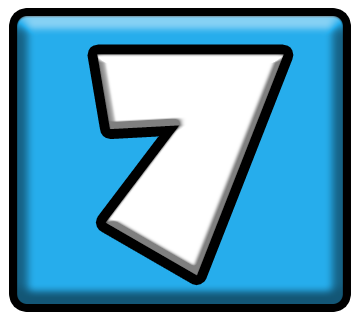
<style>
.page{position:relative;width:360px;height:320px;background:#26adec}
.page>*{position:absolute;margin:0}
.t1{font:324.4px "Funhouse";color:#ffffff;scale:0.91 1}
</style>
<div class="page">
<p class="t1" style="left:97px;top:54px;width:187px;height:222px;rotate:5deg">7</p>
</div>
